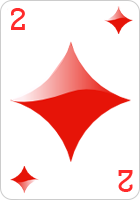
<style>
.page{position:relative;width:140px;height:200px;background:#ffffff}
.page>*{position:absolute;margin:0}
.t1{font:26px "CardCharacters";color:#ff2b2b}
</style>
<div class="page">
<p class="t1" style="left:11px;top:8px;width:14px;height:22px">2</p>
<p class="t1" style="left:118px;top:170px;width:15px;height:22px;rotate:180deg">2</p>
</div>
